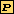
<style>
.page{position:relative;width:14px;height:14px;background:#fbd66a}
.page>*{position:absolute;margin:0}
.t1{font:10px "EngraversMT";color:#000000;font-weight:bold;font-style:italic}
</style>
<div class="page">
<p class="t1" style="left:2px;top:4px;width:9px;height:7px">P</p>
</div>
